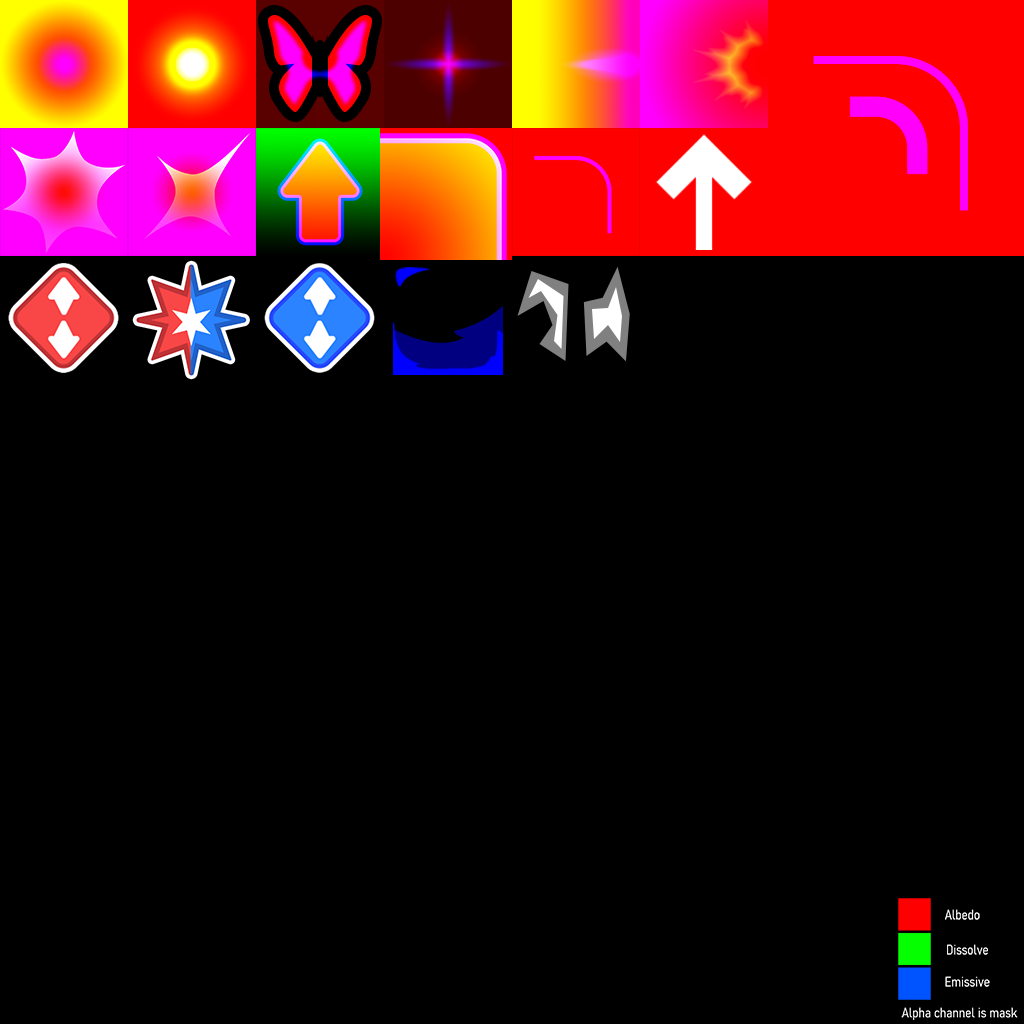
<style>
.page{position:relative;width:1024px;height:1024px;background:#000000}
.page>*{position:absolute;margin:0}
.t1{font:13.1px "Bahnschrift-LightSemiCondensed";color:#ffffff}
</style>
<div class="page">
<p class="t1" style="left:945px;top:909px;width:35px;height:11px">Albedo</p>
<p class="t1" style="left:947px;top:944px;width:41px;height:11px">Dissolve</p>
<p class="t1" style="left:945px;top:976px;width:45px;height:11px">Emissive</p>
<p class="t1" style="left:901px;top:1007px;width:117px;height:13px">Alpha channel is mask</p>
</div>
